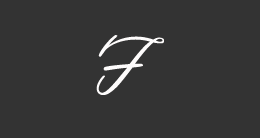
<style>
.page{position:relative;width:260px;height:138px;background:#333333}
.page>*{position:absolute;margin:0}
.t1{font:69px "VladimirScript";color:#fefcfc;text-transform:uppercase}
</style>
<div class="page">
<p class="t1" style="left:96px;top:35px;width:68px;height:60px">F</p>
</div>
